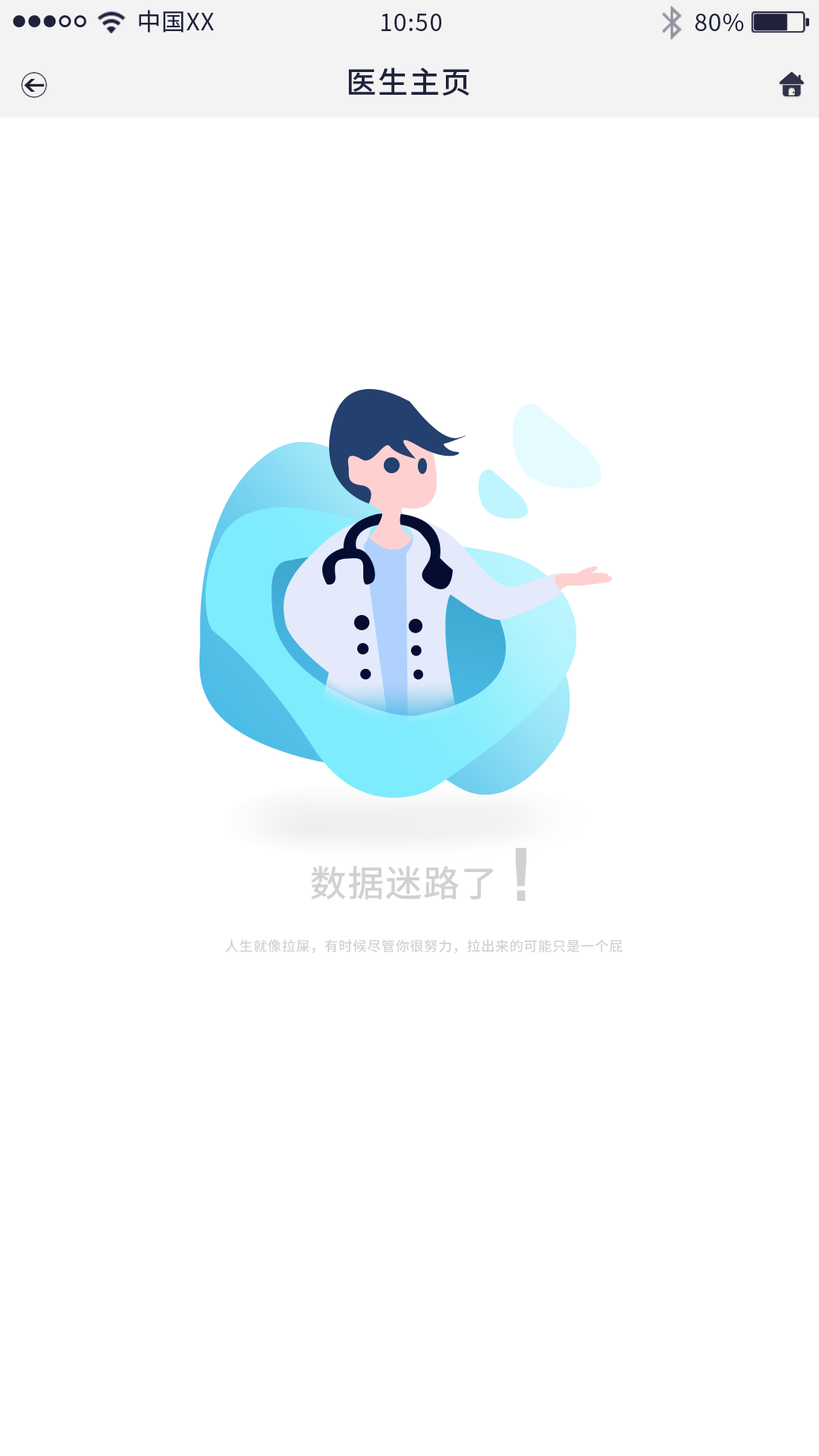
<style>
.page{position:relative;width:819px;height:1456px;background:#ffffff}
.page>*{position:absolute;margin:0}
.t1{font:23.8px "SourceHanSansCN-Regular";letter-spacing:0.04em;color:#1f223a}
.t2{font:30.3px "SourceHanSansCN-Medium";letter-spacing:0.04em;color:#1f223a}
.t3{font:36.4px "SourceHanSansCN-Medium";letter-spacing:0.025em;color:#d1d1d1}
.t4{font:13.7px "SourceHanSansCN-Medium";letter-spacing:0.025em;color:#d1d1d1}
</style>
<div class="page">
<p class="t1" style="left:139px;top:10px;width:75px;height:23px">中国XX</p>
<p class="t1" style="left:381px;top:14px;width:60px;height:17px">10:50</p>
<p class="t1" style="left:695px;top:14px;width:49px;height:17px">80%</p>
<p class="t2" style="left:349px;top:67px;width:120px;height:29px">医生主页</p>
<p class="t3" style="left:311px;top:866px;width:183px;height:34px">数据迷路了</p>
<p class="t4" style="left:225px;top:940px;width:398px;height:13px">人生就像拉屎，有时候尽管你很努力，拉出来的可能只是一个屁</p>
</div>
